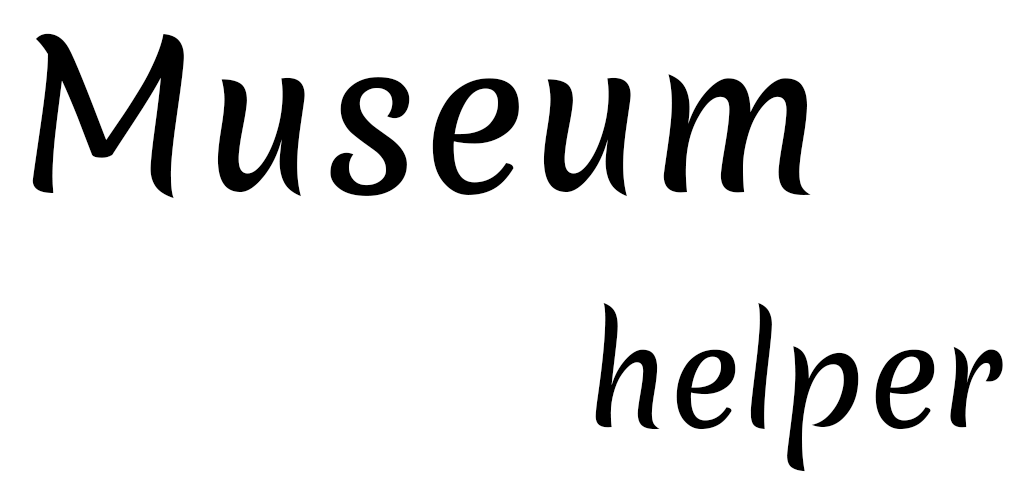
<style>
.page{position:relative;width:1024px;height:500px;background:#ffffff}
.page>*{position:absolute;margin:0}
.t1{font:197.5px "Merienda-Regular_0_wt";color:#000000}
.t2{font:133.6px "Merienda-Regular_0_wt";color:#000000}
</style>
<div class="page">
<p class="t1" style="left:32px;top:33px;width:779px;height:166px">Museum</p>
<p class="t2" style="left:595px;top:302px;width:408px;height:170px">helper</p>
</div>
